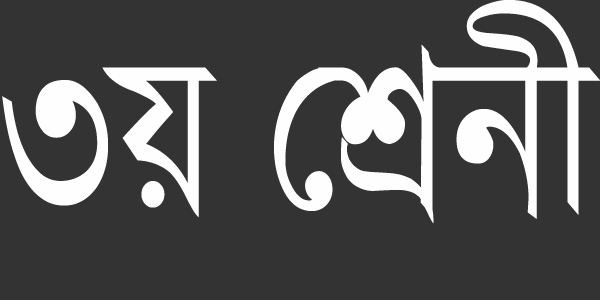
<style>
.page{position:relative;width:600px;height:300px;background:#333333}
.page>*{position:absolute;margin:0}
.t1{font:229.5px "KalpurushANSI";color:#fffeff;scale:0.86 1}
</style>
<div class="page">
<p class="t1" style="left:2px;top:0px;width:599px;height:224px">3q †kÖbx</p>
</div>
